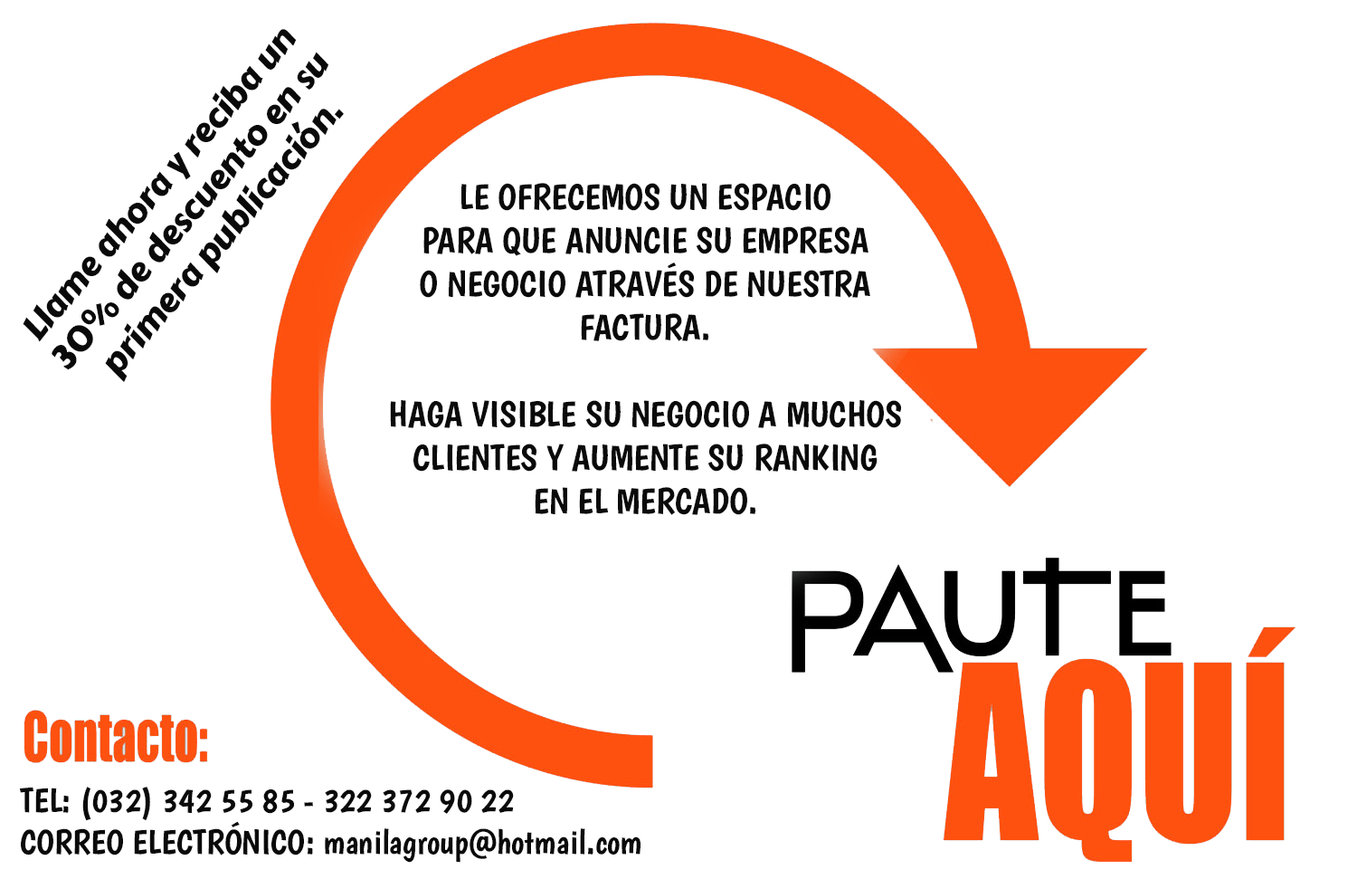
<style>
.page{position:relative;width:1357px;height:879px;background:#ffffff}
.page>*{position:absolute;margin:0}
.t1{font:34.4px "CarterOne";color:#0a0a0a}
.t2{font:36.2px "Boogaloo-Regular";color:#0a0a0a}
.t3{font:34.4px "Boogaloo-Regular";color:#0a0a0a}
</style>
<div class="page">
<p class="t1" style="left:23px;top:29px;width:321px;height:353px;rotate:-49deg">Llame ahora y reciba un 30% de descuento en su primera publicación.</p>
<p class="t2" style="left:390px;top:183px;width:511px;height:332px;text-align:center">LE OFRECEMOS UN ESPACIO<br>PARA QUE ANUNCIE SU EMPRESA<br>O NEGOCIO ATRAVÉS DE NUESTRA<br>FACTURA.<br><br>HAGA VISIBLE SU NEGOCIO A MUCHOS<br>CLIENTES Y AUMENTE SU RANKING<br>EN EL MERCADO.</p>
<p class="t3" style="left:20px;top:786px;width:621px;height:76px">TEL: (032) 342 55 85 - 322 372 90 22<br>CORREO ELECTRÓNICO: manilagroup@hotmail.com</p>
</div>
